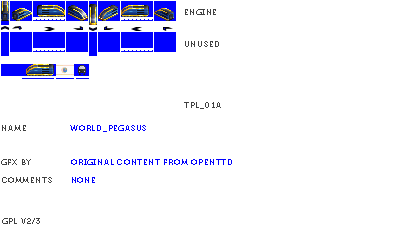
<style>
.page{position:relative;width:400px;height:230px;background:#ffffff}
.page>*{position:absolute;margin:0}
.t1{font:8px "Museo700-Regular";letter-spacing:0.075em;color:#404040;text-transform:uppercase}
.t2{font:8px "Museo700-Regular";letter-spacing:0.075em;color:#0000ff;text-transform:uppercase}
</style>
<div class="page">
<p class="t1" style="left:185px;top:9px;width:31px;height:6px">engine</p>
<p class="t1" style="left:185px;top:41px;width:34px;height:6px">unused</p>
<p class="t1" style="left:184px;top:102px;width:37px;height:7px">tpl_01a</p>
<p class="t1" style="left:2px;top:125px;width:24px;height:6px">name</p>
<p class="t2" style="left:70px;top:125px;width:76px;height:7px">World_Pegasus</p>
<p class="t1" style="left:1px;top:159px;width:30px;height:6px">gfx by</p>
<p class="t2" style="left:71px;top:159px;width:161px;height:6px">original content from openttd</p>
<p class="t1" style="left:2px;top:177px;width:50px;height:6px">comments</p>
<p class="t2" style="left:72px;top:177px;width:23px;height:6px">none</p>
<p class="t1" style="left:2px;top:218px;width:38px;height:6px">gpl v2/3</p>
</div>
